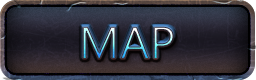
<style>
.page{position:relative;width:256px;height:80px}
.page>*{position:absolute;margin:0}
.t1{font:45.9px "SegoeUI"}
</style>
<div class="page">
<p class="t1" style="left:82px;top:26px;width:92px;height:33px">MAP</p>
</div>
